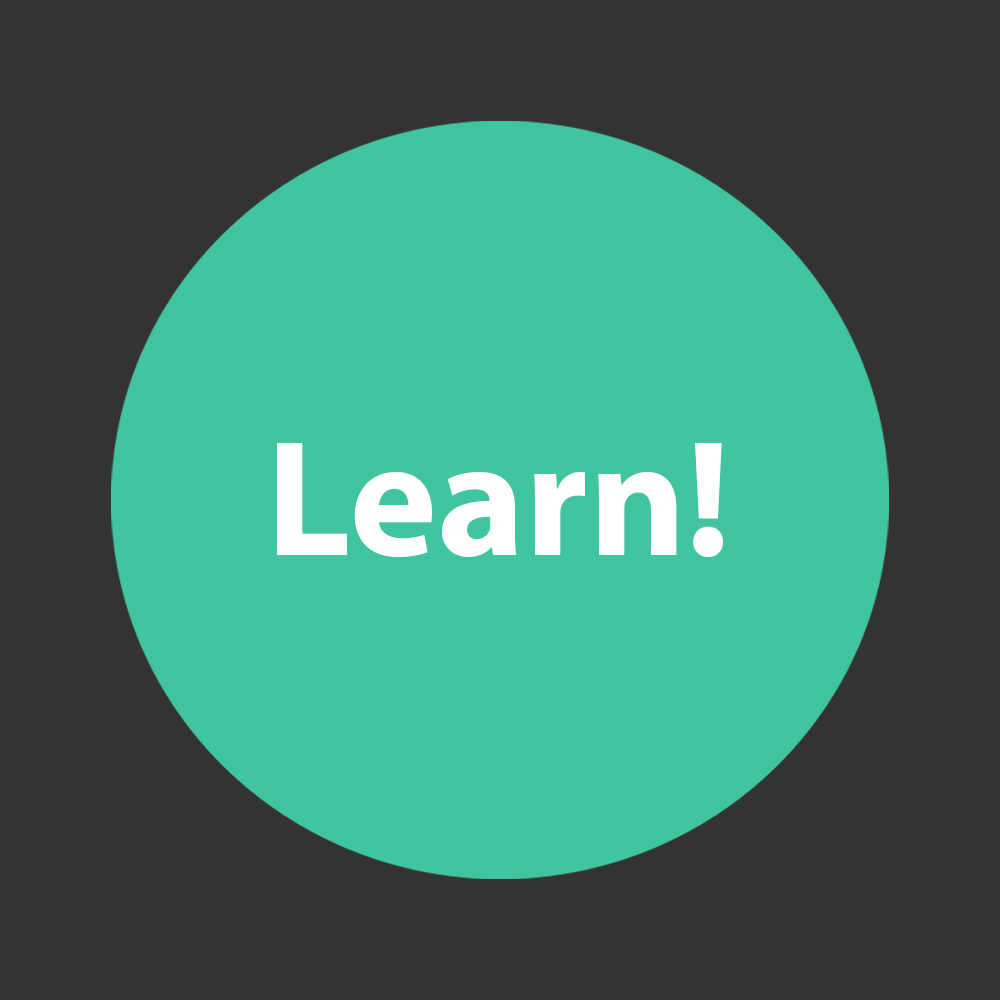
<style>
.page{position:relative;width:1000px;height:1000px;background:#333333}
.page>*{position:absolute;margin:0}
.t1{font:166.7px "MyriadPro-Bold";color:#ffffff}
</style>
<div class="page">
<p class="t1" style="left:277px;top:443px;width:446px;height:115px">Learn!</p>
</div>
